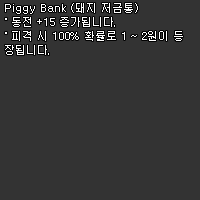
<style>
.page{position:relative;width:200px;height:200px;background:#333333}
.page>*{position:absolute;margin:0}
.t1{font:11px/14px "Dotum";color:#ffffff}
</style>
<div class="page">
<p class="t1" style="left:5px;top:3px;width:178px;height:52px">Piggy Bank (돼지 저금통)<br>˚ 동전 +15 증가됩니다.<br>˚ 피격 시 100% 확률로 1 ~ 2원이 등<br>장됩니다.</p>
</div>
